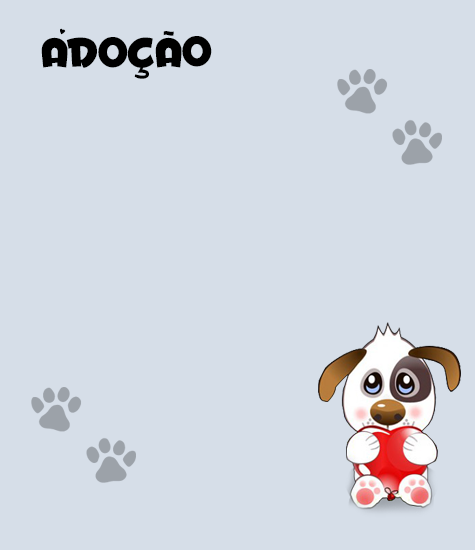
<style>
.page{position:relative;width:475px;height:550px;background:#d6dee8}
.page>*{position:absolute;margin:0}
.t1{font:48px "FontdinerdotcomLuvable";color:#000000}
</style>
<div class="page">
<p class="t1" style="left:41px;top:28px;width:171px;height:51px">ADOÇÃO</p>
</div>
